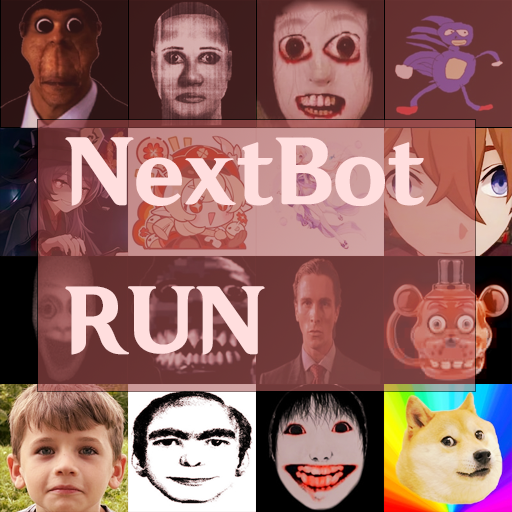
<style>
.page{position:relative;width:512px;height:512px}
.page>*{position:absolute;margin:0}
.t1{font:12px "HYWenHei-HEW";color:#ffdede}
</style>
<div class="page">
<p class="t1" style="left:65px;top:137px;width:359px;height:218px">NextBot<br>RUN</p>
</div>
